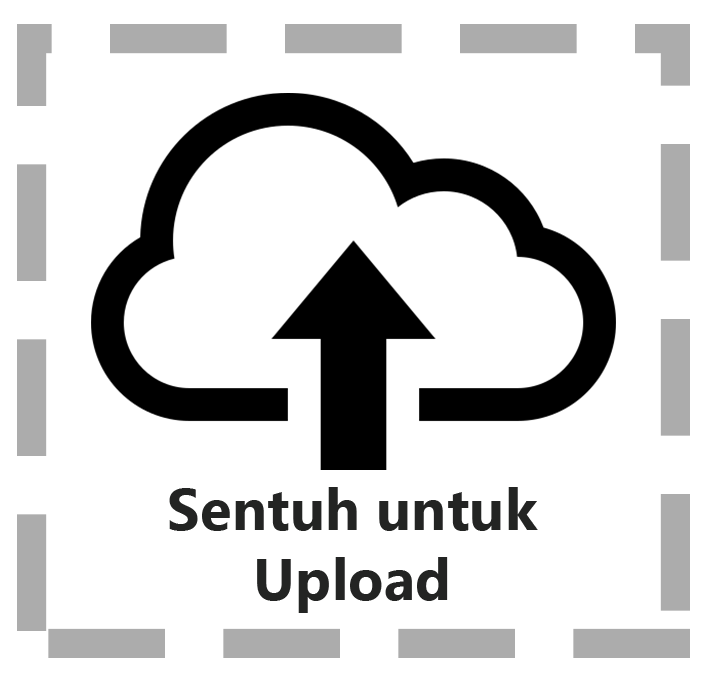
<style>
.page{position:relative;width:707px;height:674px;background:#ffffff}
.page>*{position:absolute;margin:0}
.t1{font:58.3px "Gadugi-Bold";color:#232423}
</style>
<div class="page">
<p class="t1" style="left:169px;top:487px;width:369px;height:126px;text-align:center">Sentuh untuk<br>Upload</p>
</div>
